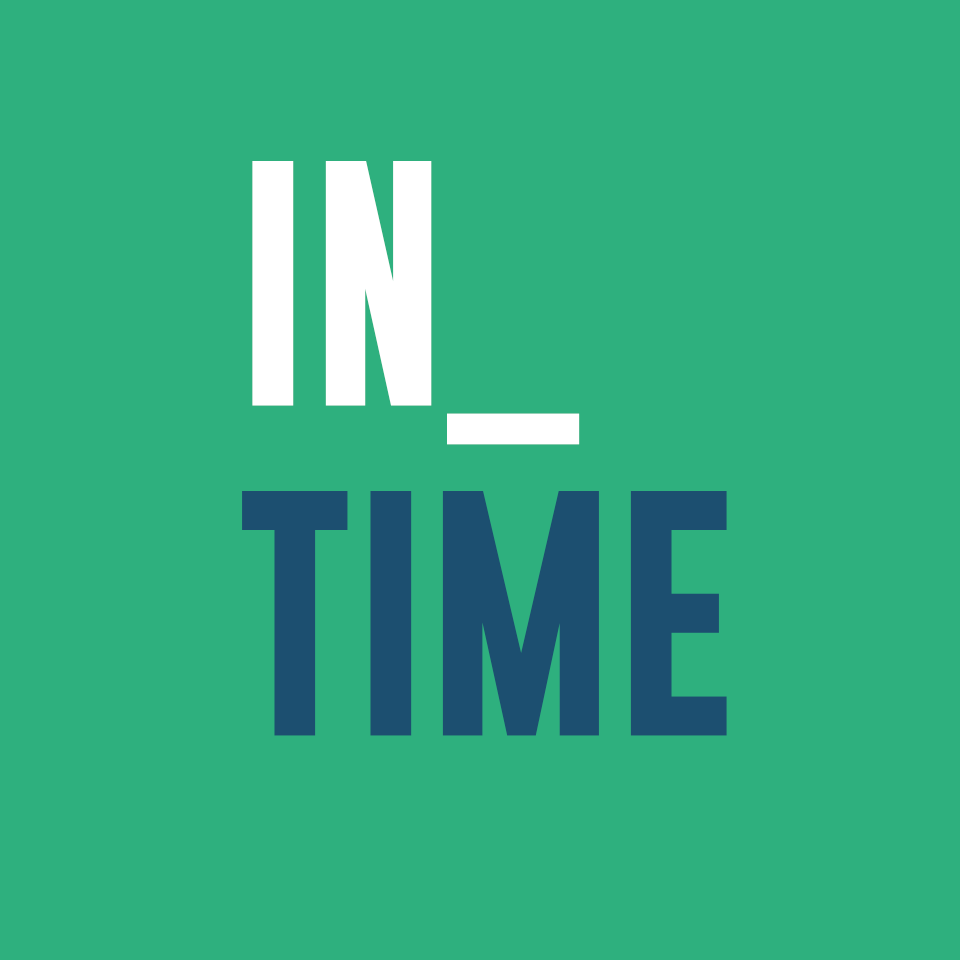
<style>
.page{position:relative;width:960px;height:960px;background:#2eb07e}
.page>*{position:absolute;margin:0}
.t1{font:250px/41.3px "GoboldBold";color:#1c4f70}
.t2{font:250px/41.3px "GoboldBold";color:#ffffff}
</style>
<div class="page">
<p class="t1" style="left:242px;top:161px;width:485px;height:575px"><span class="t2">IN_<br></span><br><br><br><br><br><br><br>TIME</p>
</div>
